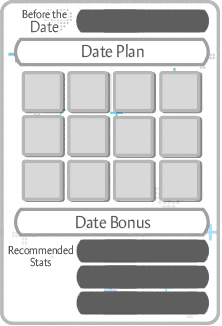
<style>
.page{position:relative;width:222px;height:326px;background:#ffffff}
.page>*{position:absolute;margin:0}
.t1{font:11.7px "Amira-Light";letter-spacing:-0.01em;color:#5a5a5a;scale:0.91 1}
.t2{font:16.1px "Amira-Light";letter-spacing:-0.01em;color:#5a5a5a;scale:0.91 1}
.t3{font:17.6px "Amira-Roman";letter-spacing:-0.01em;color:#5a5a5a;scale:0.91 1}
</style>
<div class="page">
<p class="t1" style="left:22px;top:9px;width:45px;height:10px">Before the</p>
<p class="t2" style="left:31px;top:20px;width:28px;height:13px">Date</p>
<p class="t3" style="left:82px;top:43px;width:62px;height:15px">Date Plan</p>
<p class="t3" style="left:76px;top:215px;width:75px;height:14px">Date Bonus</p>
<p class="t1" style="left:8px;top:245px;width:65px;height:22px;text-align:center">Recommended Stats</p>
</div>
